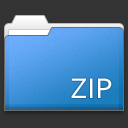
<style>
.page{position:relative;width:128px;height:128px;background:#333333}
.page>*{position:absolute;margin:0}
.t1{font:30px "Corbel";letter-spacing:0.01em;color:#ffffff}
</style>
<div class="page">
<p class="t1" style="left:71px;top:78px;width:41px;height:20px">ZIP</p>
</div>
